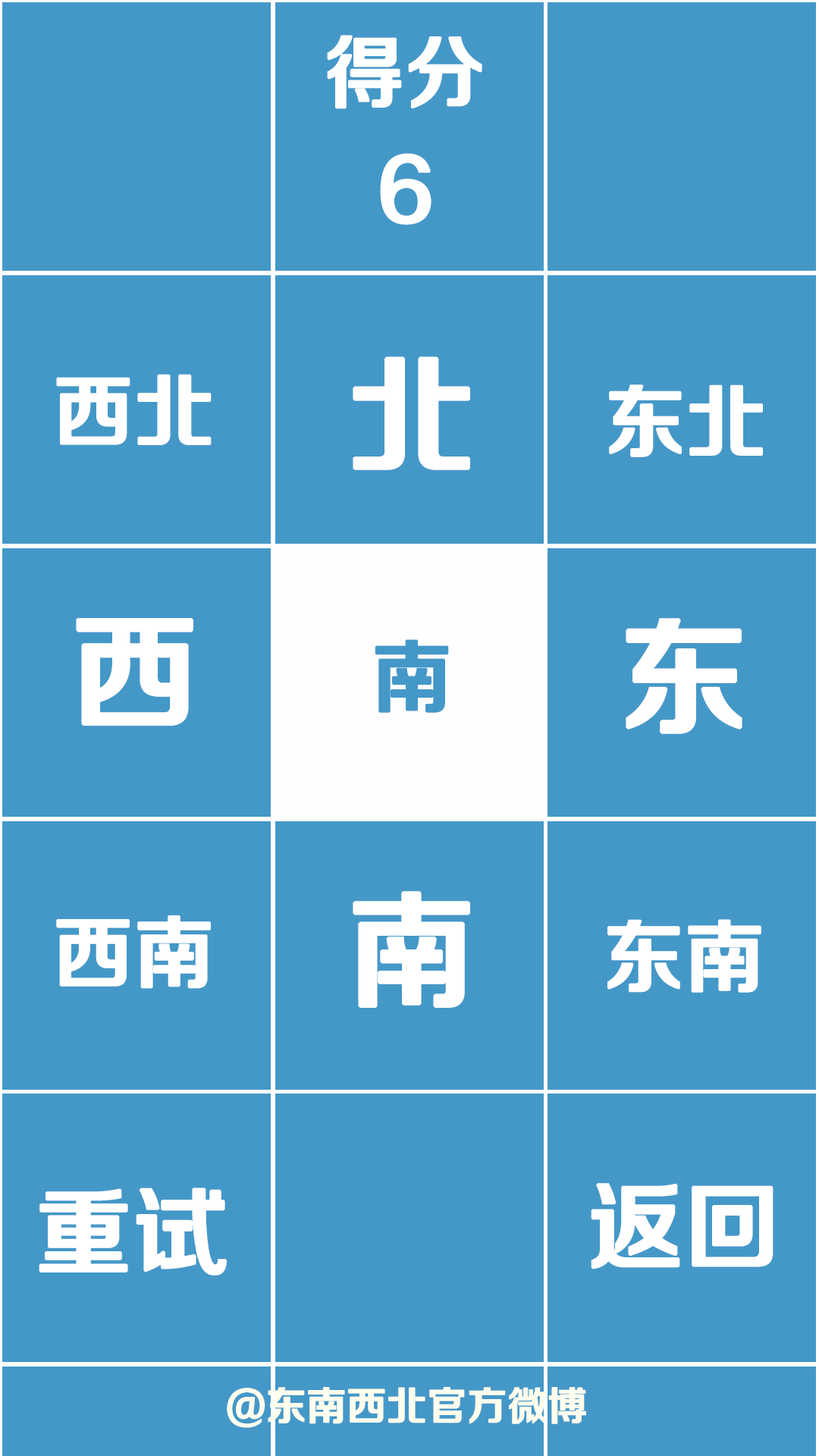
<style>
.page{position:relative;width:819px;height:1456px;background:#4498c8}
.page>*{position:absolute;margin:0}
.t1{font:79px "FZZZHONGJW--GB1-0";color:#feffff;font-weight:bold}
.t2{font:126.4px "FZZZHONGJW--GB1-0";color:#ffffff;font-weight:bold}
.t3{font:79px "FZZZHONGJW--GB1-0";color:#ffffff;font-weight:bold}
.t4{font:79px "FZZZHONGJW--GB1-0";color:#4498c8;font-weight:bold}
.t5{font:94.8px "FZZZHONGJW--GB1-0";color:#ffffff;font-weight:bold}
.t6{font:39.5px "FZZZHONGJW--GB1-0";color:#fefdee;font-weight:bold}
</style>
<div class="page">
<p class="t1" style="left:327px;top:35px;width:155px;height:74px">得分</p>
<p class="t1" style="left:380px;top:153px;width:51px;height:72px">6</p>
<p class="t2" style="left:353px;top:356px;width:117px;height:114px">北</p>
<p class="t3" style="left:56px;top:374px;width:156px;height:71px">西北</p>
<p class="t3" style="left:609px;top:384px;width:154px;height:73px">东北</p>
<p class="t2" style="left:76px;top:618px;width:117px;height:108px">西</p>
<p class="t2" style="left:626px;top:618px;width:116px;height:116px">东</p>
<p class="t4" style="left:375px;top:639px;width:74px;height:74px">南</p>
<p class="t2" style="left:353px;top:891px;width:117px;height:117px">南</p>
<p class="t3" style="left:56px;top:915px;width:155px;height:74px">西南</p>
<p class="t3" style="left:607px;top:919px;width:154px;height:74px">东南</p>
<p class="t5" style="left:39px;top:1188px;width:188px;height:87px">重试</p>
<p class="t5" style="left:591px;top:1183px;width:182px;height:86px">返回</p>
<p class="t6" style="left:227px;top:1387px;width:359px;height:41px">@东南西北官方微博</p>
</div>
